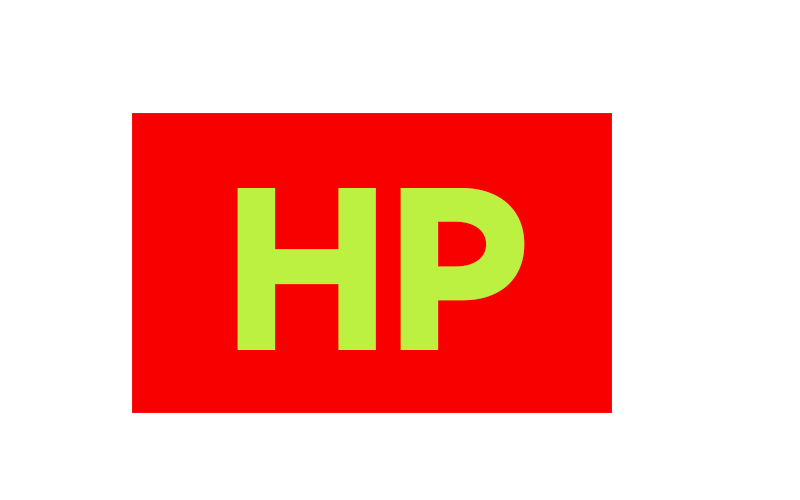
<style>
.page{position:relative;width:800px;height:500px;background:#ffffff}
.page>*{position:absolute;margin:0}
.t1{font:200px "MiSans-Heavy";color:#bdf141}
</style>
<div class="page">
<p class="t1" style="left:237px;top:188px;width:288px;height:162px">HP</p>
</div>
